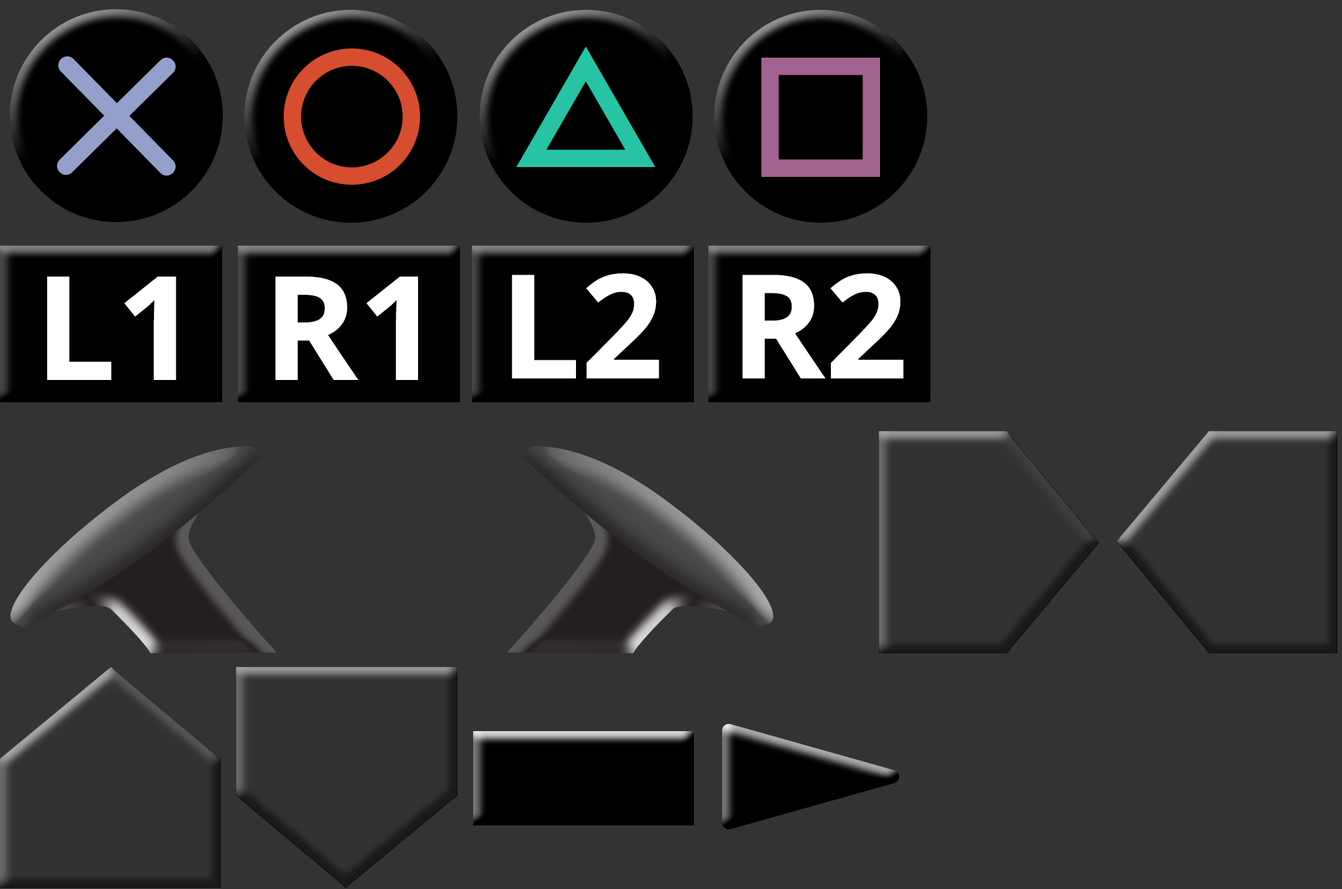
<style>
.page{position:relative;width:1342px;height:889px;background:#333333}
.page>*{position:absolute;margin:0}
.t1{font:144.7px "OpenSans-Bold";color:#ffffff}
</style>
<div class="page">
<p class="t1" style="left:47px;top:276px;width:129px;height:104px">L1</p>
<p class="t1" style="left:275px;top:276px;width:143px;height:104px">R1</p>
<p class="t1" style="left:512px;top:273px;width:147px;height:106px">L2</p>
<p class="t1" style="left:742px;top:273px;width:161px;height:106px">R2</p>
</div>
